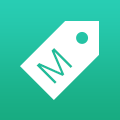
<style>
.page{position:relative;width:120px;height:120px;background:#ffffff}
.page>*{position:absolute;margin:0}
.t1{font:36px "HelveticaNeue-Light";color:#20bc9a}
</style>
<div class="page">
<p class="t1" style="left:36px;top:48px;width:37px;height:36px;rotate:-45deg">M</p>
</div>
